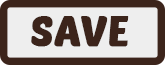
<style>
.page{position:relative;width:165px;height:65px;background:#eeeeee}
.page>*{position:absolute;margin:0}
.t1{font:41.7px "PoetsenOne-Regular";color:#3c241b;font-weight:bold}
</style>
<div class="page">
<p class="t1" style="left:31px;top:16px;width:98px;height:31px">SAVE</p>
</div>
